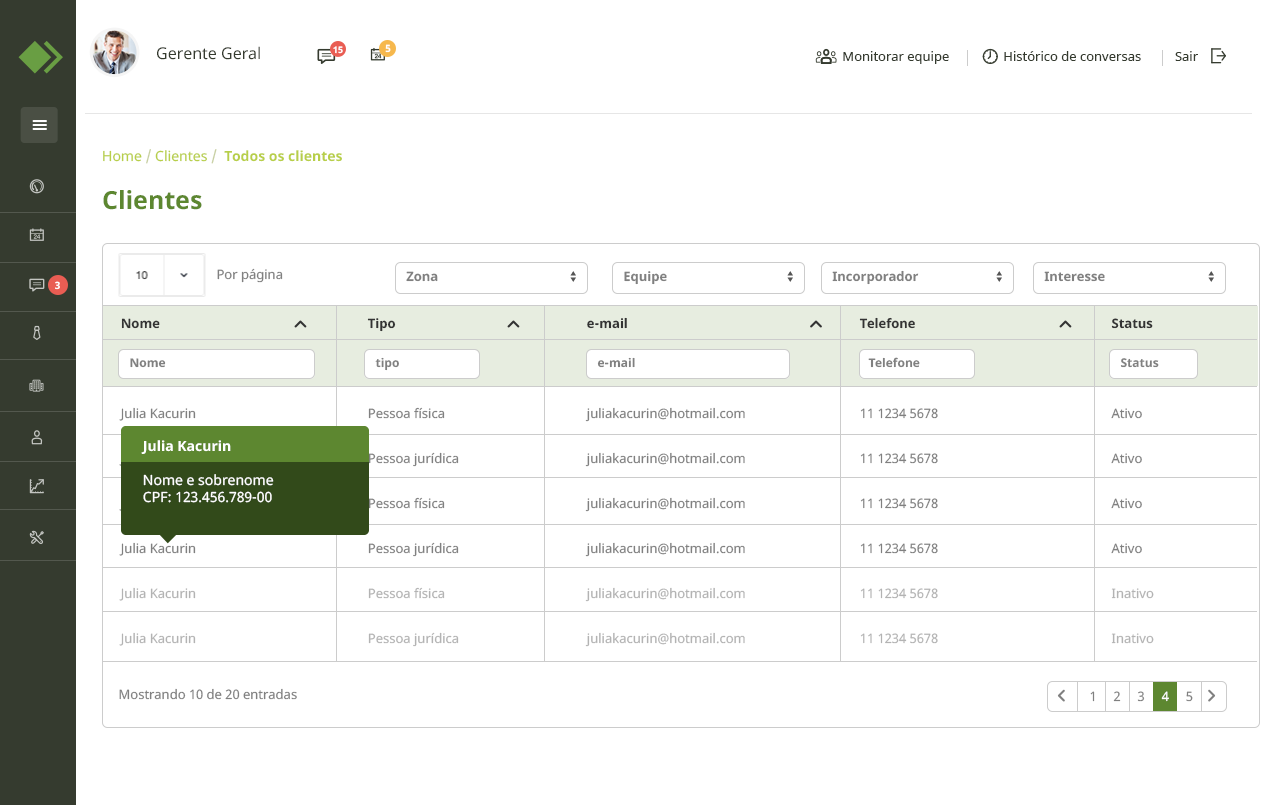
<style>
.page{position:relative;width:1280px;height:805px;background:#ffffff}
.page>*{position:absolute;margin:0}
.t1{font:16px "NotoSans";color:#353b2f}
.t2{font:9px "NotoSans-Bold";color:#ffffff}
.t3{font:10px "NotoSans-Bold";color:#ffffff}
.t4{font:13px "NotoSans";color:#353b2f}
.t5{font:14px "NotoSans-Bold";color:#b8cf49}
.t6{font:14px "NotoSans";color:#b8cf49}
.t7{font:14px "NotoSans";color:#c7cfa1}
.t8{font:25px "NotoSans-Bold";color:#5d8730}
.t9{font:13px "NotoSans";color:#808080}
.t10{font:13px "NotoSans-Bold";color:#808080}
.t11{font:13px/45px "NotoSans";color:#808080}
.t12{font:13px/45px "NotoSans-Bold";color:#333333}
.t13{font:13px/45px "NotoSans";color:#b3b3b3}
.t14{font:12px "NotoSans-Bold";color:#808080}
.t15{font:14px "NotoSans";color:#ffffff}
.t16{font:14px "NotoSans-Bold";color:#ffffff}
</style>
<div class="page">
<p class="t1" style="left:157px;top:46px;width:103px;height:14px">Gerente Geral</p>
<p class="t2" style="left:333px;top:46px;width:10px;height:8px">15</p>
<p class="t3" style="left:385px;top:44px;width:6px;height:9px">5</p>
<p class="t4" style="left:843px;top:51px;width:355px;height:13px">Monitorar equipe                Histórico de conversas          Sair</p>
<p class="t5" style="left:103px;top:149px;width:239px;height:15px"><span class="t6">Home </span><span class="t7">/</span><span class="t6"> Clientes </span><span class="t7">/  </span>Todos os clientes</p>
<p class="t8" style="left:103px;top:190px;width:99px;height:20px">Clientes</p>
<p class="t9" style="left:217px;top:268px;width:66px;height:15px">Por página</p>
<p class="t10" style="left:832px;top:270px;width:87px;height:15px">Incorporador</p>
<p class="t3" style="left:55px;top:281px;width:5px;height:9px">3</p>
<p class="t10" style="left:406px;top:271px;width:32px;height:11px">Zona</p>
<p class="t10" style="left:624px;top:271px;width:43px;height:14px">Equipe</p>
<p class="t10" style="left:1044px;top:271px;width:61px;height:11px">Interesse</p>
<p class="t11" style="left:367px;top:318px;width:92px;height:329px"><span class="t12">Tipo<br><br></span>Pessoa física<br>Pessoa jurídica<br>Pessoa física<br>Pessoa jurídica<br><span class="t13">Pessoa física<br>Pessoa jurídica</span></p>
<p class="t11" style="left:585px;top:317px;width:160px;height:330px"><span class="t12">e-mail<br></span><br>juliakacurin@hotmail.com<br>juliakacurin@hotmail.com<br>juliakacurin@hotmail.com<br>juliakacurin@hotmail.com<br><span class="t13">juliakacurin@hotmail.com<br>juliakacurin@hotmail.com</span></p>
<p class="t11" style="left:859px;top:317px;width:79px;height:327px"><span class="t12">Telefone<br></span><br>11 1234 5678<br>11 1234 5678<br>11 1234 5678<br>11 1234 5678<br><span class="t13">11 1234 5678<br>11 1234 5678</span></p>
<p class="t11" style="left:1111px;top:318px;width:43px;height:326px"><span class="t12">Status<br></span>Visita<br>Ativo<br>Ativo<br>Ativo<br>Ativo<br><span class="t13">Inativo<br>Inativo</span></p>
<p class="t14" style="left:130px;top:358px;width:36px;height:10px">Nome</p>
<p class="t14" style="left:375px;top:357px;width:24px;height:14px">tipo</p>
<p class="t14" style="left:597px;top:357px;width:38px;height:11px">e-mail</p>
<p class="t14" style="left:868px;top:357px;width:52px;height:11px">Telefone</p>
<p class="t14" style="left:1120px;top:358px;width:39px;height:10px">Status</p>
<p class="t15" style="left:141px;top:440px;width:133px;height:63px"><span class="t16">Julia Kacurin<br></span><br>Nome e sobrenome<br>CPF: 123.456.789-00</p>
<p class="t9" style="left:119px;top:688px;width:178px;height:12px">Mostrando 10 de 20 entradas</p>
</div>
